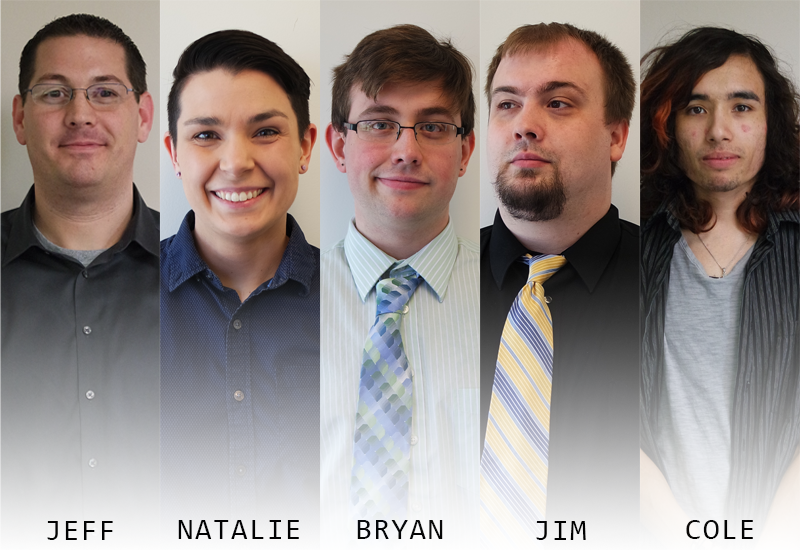
<style>
.page{position:relative;width:800px;height:550px}
.page>*{position:absolute;margin:0}
.t1{font:30px "Consolas";letter-spacing:0.05em;color:#000000}
</style>
<div class="page">
<p class="t1" style="left:47px;top:521px;width:66px;height:19px">JEFF</p>
<p class="t1" style="left:178px;top:520px;width:121px;height:19px">NATALIE</p>
<p class="t1" style="left:357px;top:520px;width:86px;height:19px">BRYAN</p>
<p class="t1" style="left:536px;top:521px;width:50px;height:19px">JIM</p>
<p class="t1" style="left:686px;top:520px;width:67px;height:19px">COLE</p>
</div>
